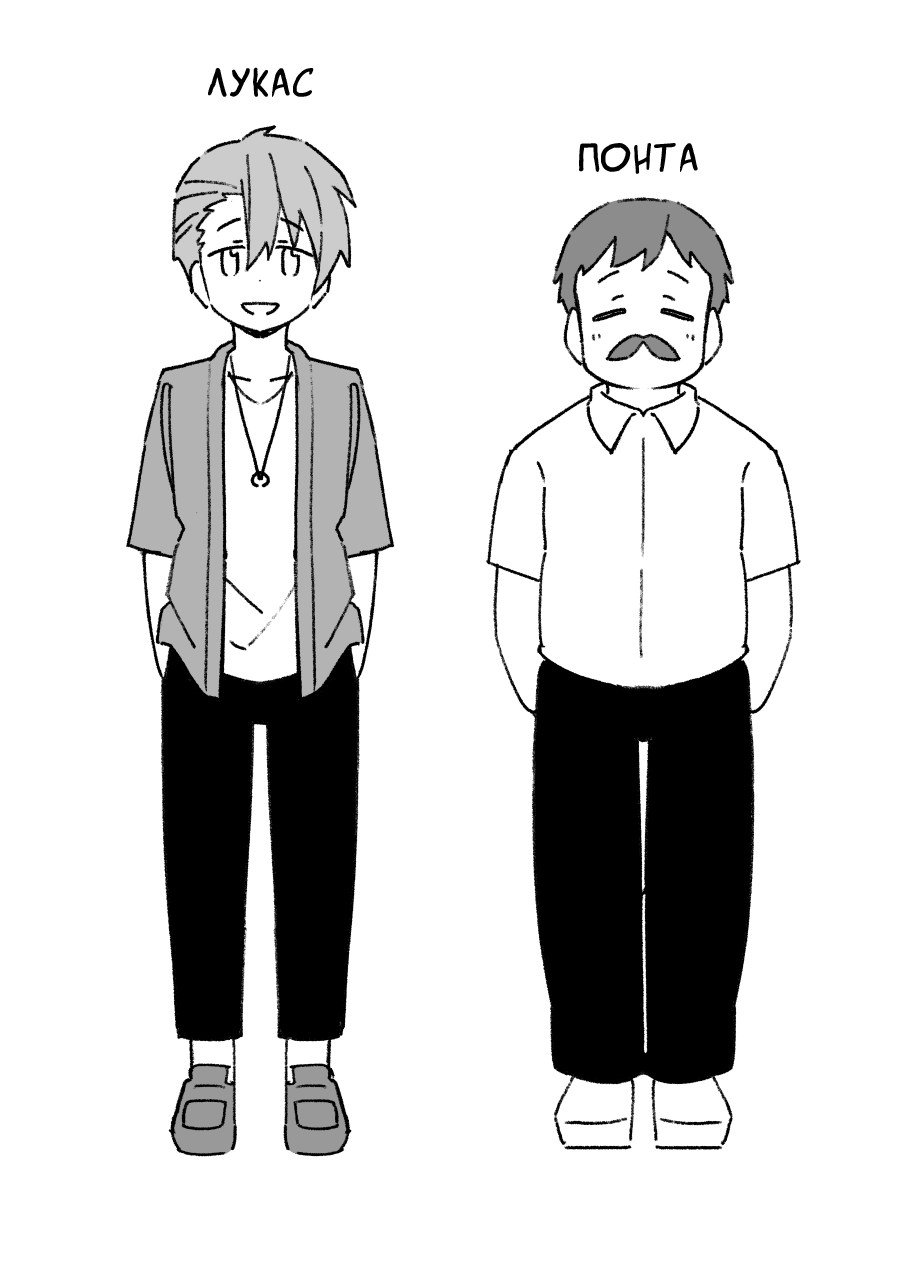
<style>
.page{position:relative;width:900px;height:1271px;background:#ffffff}
.page>*{position:absolute;margin:0}
.t1{font:41.7px "SuperWebcomicBros.Rusbyyakustick";color:#000000}
</style>
<div class="page">
<p class="t1" style="left:208px;top:67px;width:106px;height:30px">Лукас</p>
<p class="t1" style="left:579px;top:143px;width:119px;height:31px">Понта</p>
</div>
